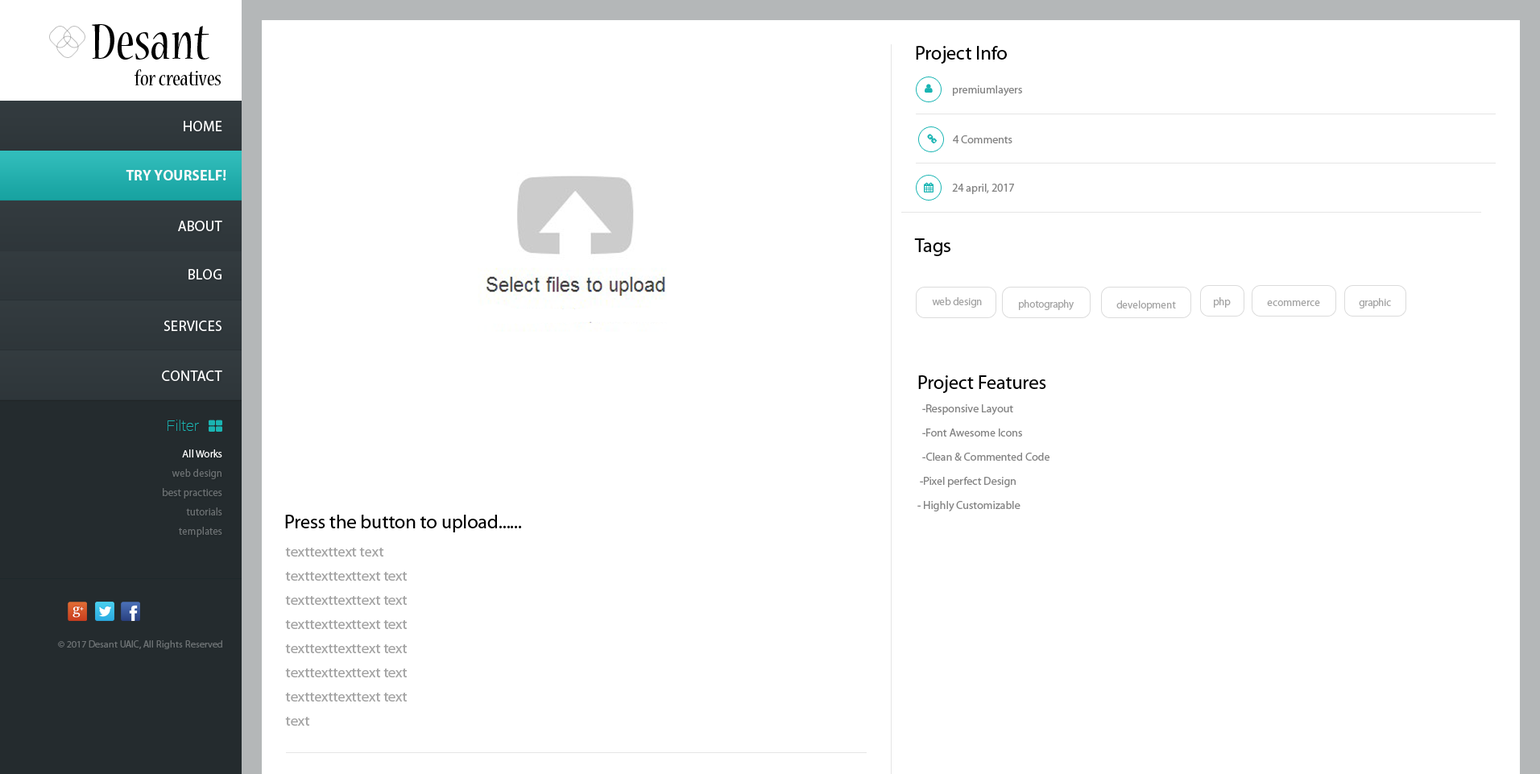
<style>
.page{position:relative;width:1540px;height:774px;background:#ffffff}
.page>*{position:absolute;margin:0}
.t1{font:56.4px "NuevaStd-Cond";color:#000000}
.t2{font:19.3px "MyriadPro-Regular";color:#000000}
.t3{font:23.3px "NuevaStd-Cond";color:#000000}
.t4{font:11.3px "MyriadPro-Regular";color:#848484}
.t5{font:14.5px "MyriadPro-Regular";color:#ffffff;text-transform:uppercase}
.t6{font:14.5px "MyriadPro-Bold";color:#fbf9f9;text-transform:uppercase}
.t7{font:10.5px "MyriadPro-Regular";color:#a3a3a3}
.t8{font:11.3px/24.2px "MyriadPro-Regular";color:#848484}
.t9{font:15.3px "Roboto-Thin";color:#1ab5b3}
.t10{font:10.5px/19.3px "MyriadPro-Regular";color:#6b7072}
.t11{font:10.5px/19.3px "MyriadPro-Regular";color:#ffffff}
.t12{font:14.5px/24.2px "MyriadPro-Regular";color:#a3a3a3}
.t13{font:9.7px "MyriadPro-Regular";color:#6b7072}
</style>
<div class="page">
<p class="t1" style="left:92px;top:24px;width:117px;height:36px">Desant</p>
<p class="t2" style="left:916px;top:46px;width:91px;height:18px">Project Info</p>
<p class="t3" style="left:135px;top:69px;width:86px;height:16px">for creatives</p>
<p class="t4" style="left:953px;top:85px;width:69px;height:11px">premiumlayers</p>
<p class="t5" style="left:184px;top:121px;width:38px;height:10px">Home</p>
<p class="t4" style="left:953px;top:135px;width:60px;height:8px">4 Comments</p>
<p class="t6" style="left:126px;top:170px;width:100px;height:10px">Try Yourself!</p>
<p class="t4" style="left:952px;top:184px;width:62px;height:10px">24 april, 2017</p>
<p class="t5" style="left:178px;top:221px;width:44px;height:10px">About</p>
<p class="t2" style="left:914px;top:238px;width:37px;height:18px">Tags</p>
<p class="t5" style="left:189px;top:269px;width:33px;height:11px">Blog</p>
<p class="t7" style="left:932px;top:297px;width:50px;height:11px">web design</p>
<p class="t7" style="left:1019px;top:300px;width:55px;height:10px">photography</p>
<p class="t7" style="left:1117px;top:300px;width:59px;height:11px">development</p>
<p class="t7" style="left:1214px;top:297px;width:17px;height:11px">php</p>
<p class="t7" style="left:1267px;top:300px;width:53px;height:6px">ecommerce</p>
<p class="t7" style="left:1359px;top:298px;width:32px;height:11px">graphic</p>
<p class="t5" style="left:164px;top:321px;width:58px;height:10px">Services</p>
<p class="t5" style="left:162px;top:371px;width:60px;height:10px">Contact</p>
<p class="t2" style="left:918px;top:375px;width:128px;height:18px">Project Features</p>
<p class="t8" style="left:918px;top:404px;width:132px;height:108px">-Responsive Layout<br>  -Font Awesome Icons<br>  -Clean &amp; Commented Code<br> -Pixel perfect Design<br>- Highly Customizable</p>
<p class="t9" style="left:168px;top:420px;width:31px;height:11px">Filter</p>
<p class="t10" style="left:163px;top:450px;width:59px;height:87px;text-align:right"><span class="t11">All Works<br></span>web design<br>best practices<br>tutorials<br>templates</p>
<p class="t2" style="left:285px;top:515px;width:237px;height:17px">Press the button to upload......</p>
<p class="t12" style="left:285px;top:548px;width:123px;height:178px">texttexttext text<br>texttexttexttext text<br>texttexttexttext text<br>texttexttexttext text<br>texttexttexttext text<br>texttexttexttext text<br>texttexttexttext text<br>text</p>
<p class="t13" style="left:58px;top:640px;width:164px;height:9px">© 2017 Desant UAIC, All Rights Reserved</p>
</div>
